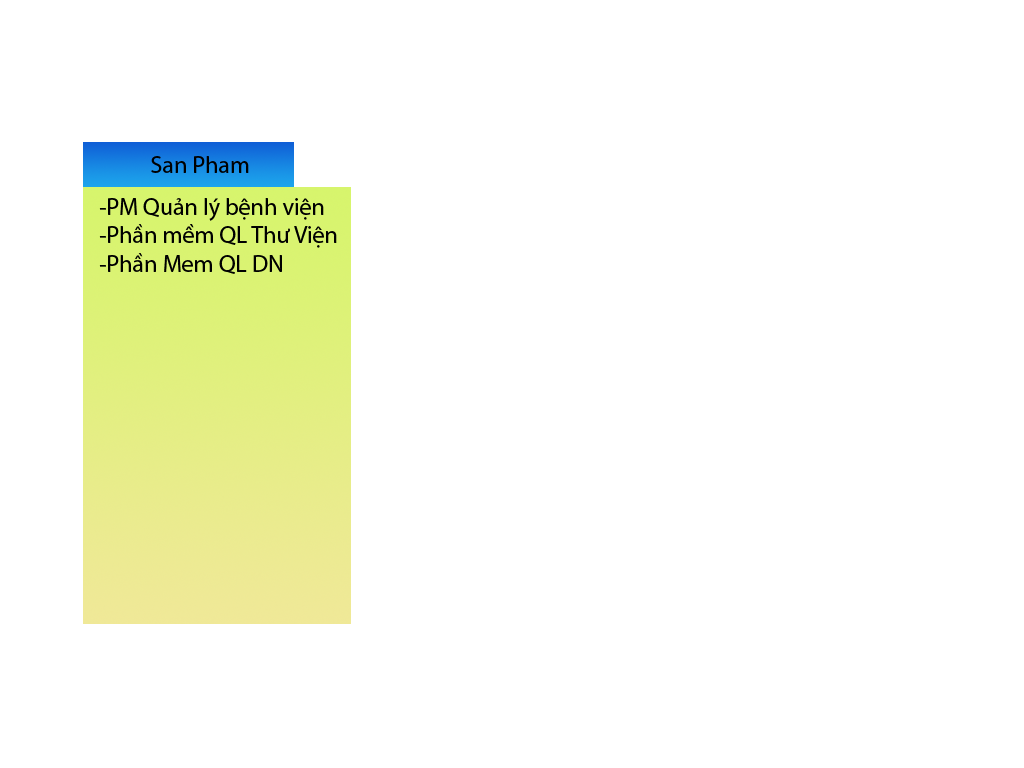
<style>
.page{position:relative;width:1024px;height:768px;background:#ffffff}
.page>*{position:absolute;margin:0}
.t1{font:24px "MyriadPro-Regular";color:#000000}
</style>
<div class="page">
<p class="t1" style="left:151px;top:156px;width:98px;height:17px">San Pham</p>
<p class="t1" style="left:99px;top:198px;width:238px;height:76px">-PM Quản lý bệnh viện<br>-Phần mềm QL Thư Viện<br>-Phần Mem QL DN</p>
</div>
